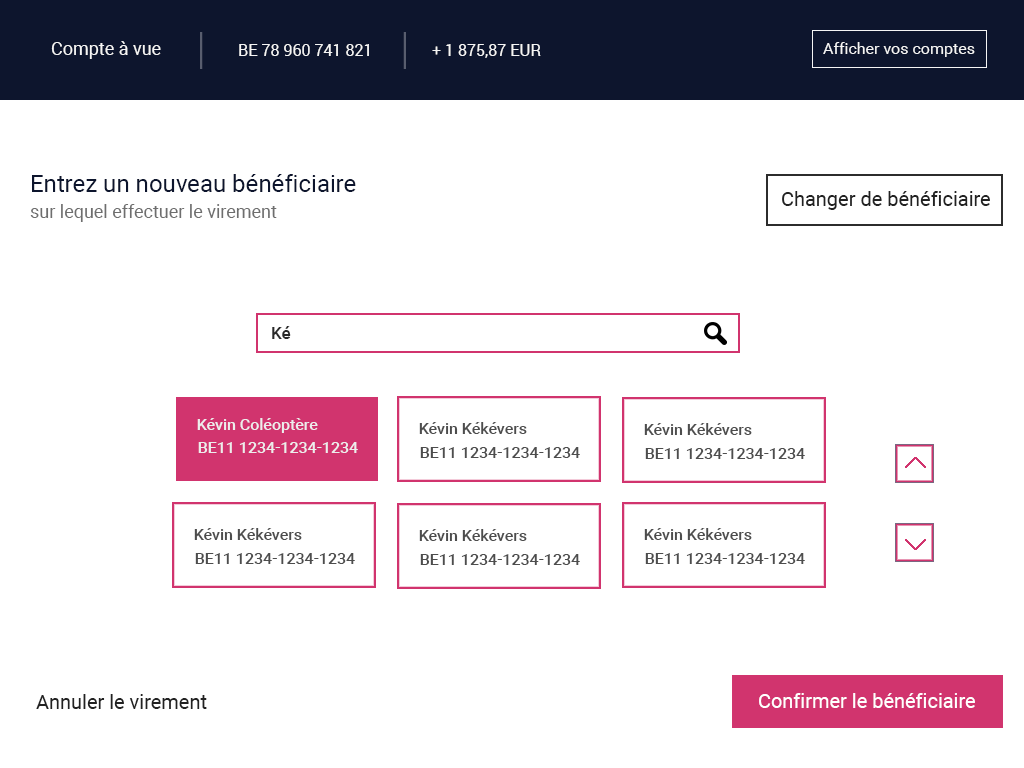
<style>
.page{position:relative;width:1024px;height:768px;background:#ffffff}
.page>*{position:absolute;margin:0}
.t1{font:18px "Roboto-Regular";color:#f5f5f5}
.t2{font:16px "Roboto-Regular";color:#f5f5f5}
.t3{font:24px "Roboto-Regular";color:#0d152d}
.t4{font:20px "Roboto-Regular";color:#222222}
.t5{font:18px "Roboto-Regular";color:#6e6e6e}
.t6{font:17px "Roboto-Medium";color:#2a2a2a}
.t7{font:15.9px "Roboto-Medium";color:#ededed}
.t8{font:15.9px "Roboto-Medium";color:#4d4d4d}
.t9{font:20px "Roboto-Regular";color:#ffffff}
</style>
<div class="page">
<p class="t1" style="left:51px;top:41px;width:110px;height:18px">Compte à vue</p>
<p class="t2" style="left:239px;top:44px;width:130px;height:12px">BE 78 960 741 821</p>
<p class="t2" style="left:432px;top:44px;width:109px;height:14px">+ 1 875,87 EUR</p>
<p class="t2" style="left:823px;top:42px;width:152px;height:15px">Afficher vos comptes</p>
<p class="t3" style="left:32px;top:174px;width:324px;height:18px">Entrez un nouveau bénéficiaire</p>
<p class="t4" style="left:782px;top:191px;width:208px;height:19px">Changer de bénéficiaire</p>
<p class="t5" style="left:30px;top:204px;width:247px;height:18px">sur lequel effectuer le virement</p>
<p class="t6" style="left:272px;top:326px;width:19px;height:13px">Ké</p>
<p class="t7" style="left:197px;top:418px;width:121px;height:15px">Kévin Coléoptère</p>
<p class="t8" style="left:419px;top:422px;width:108px;height:12px">Kévin Kékévers</p>
<p class="t8" style="left:644px;top:423px;width:108px;height:12px">Kévin Kékévers</p>
<p class="t7" style="left:198px;top:442px;width:160px;height:11px">BE11 1234-1234-1234</p>
<p class="t8" style="left:420px;top:447px;width:160px;height:11px">BE11 1234-1234-1234</p>
<p class="t8" style="left:645px;top:448px;width:160px;height:11px">BE11 1234-1234-1234</p>
<p class="t8" style="left:194px;top:528px;width:108px;height:12px">Kévin Kékévers</p>
<p class="t8" style="left:419px;top:529px;width:108px;height:12px">Kévin Kékévers</p>
<p class="t8" style="left:644px;top:528px;width:108px;height:12px">Kévin Kékévers</p>
<p class="t8" style="left:195px;top:553px;width:160px;height:11px">BE11 1234-1234-1234</p>
<p class="t8" style="left:420px;top:554px;width:160px;height:11px">BE11 1234-1234-1234</p>
<p class="t8" style="left:645px;top:553px;width:160px;height:11px">BE11 1234-1234-1234</p>
<p class="t4" style="left:36px;top:694px;width:171px;height:15px">Annuler le virement</p>
<p class="t9" style="left:759px;top:693px;width:216px;height:15px">Confirmer le bénéficiaire</p>
</div>
